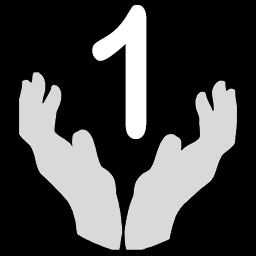
<style>
.page{position:relative;width:256px;height:256px;background:#000000}
.page>*{position:absolute;margin:0}
.t1{font:182.4px "ArialRoundedMTBold";letter-spacing:-0.4em;color:#ffffff;font-variant:small-caps;scale:0.83 1}
</style>
<div class="page">
<p class="t1" style="left:92px;top:5px;width:55px;height:134px">1</p>
</div>
